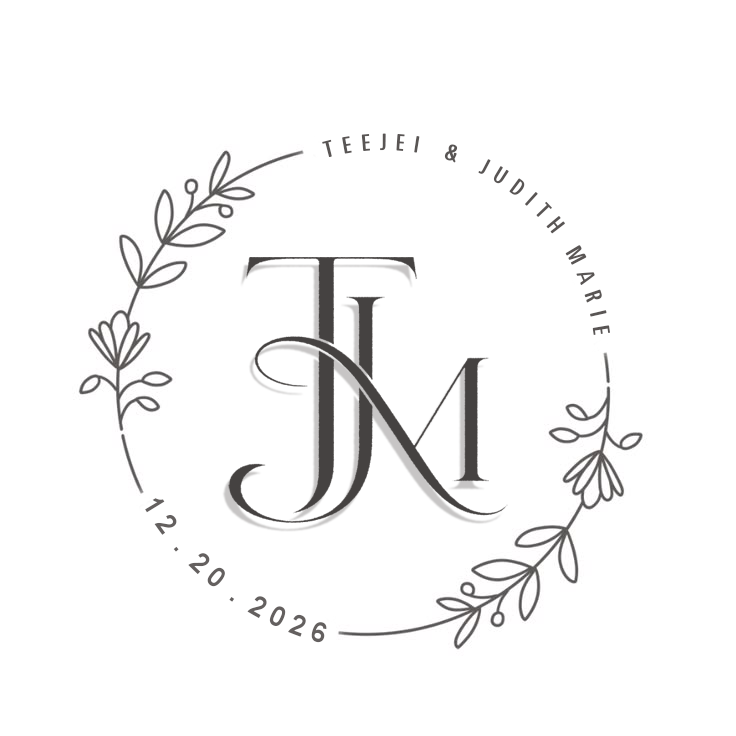
<style>
.page{position:relative;width:736px;height:736px;background:#ffffff}
.page>*{position:absolute;margin:0}
.t1{font:17.2px "Calibri-Bold";color:#595554}
.t2{font:26px "Arial-BoldMT";color:#64605f}
</style>
<div class="page">
<p class="t1" style="left:322px;top:133px;width:288px;height:202px;rotate:34deg">T  E  E  J  E  I      &amp;      J  U  D  I  T  H     M  A  R  I  E</p>
<p class="t2" style="left:145px;top:498px;width:182px;height:145px;rotate:38deg">1 2  .  2 0  .  2 0 2 6</p>
</div>
